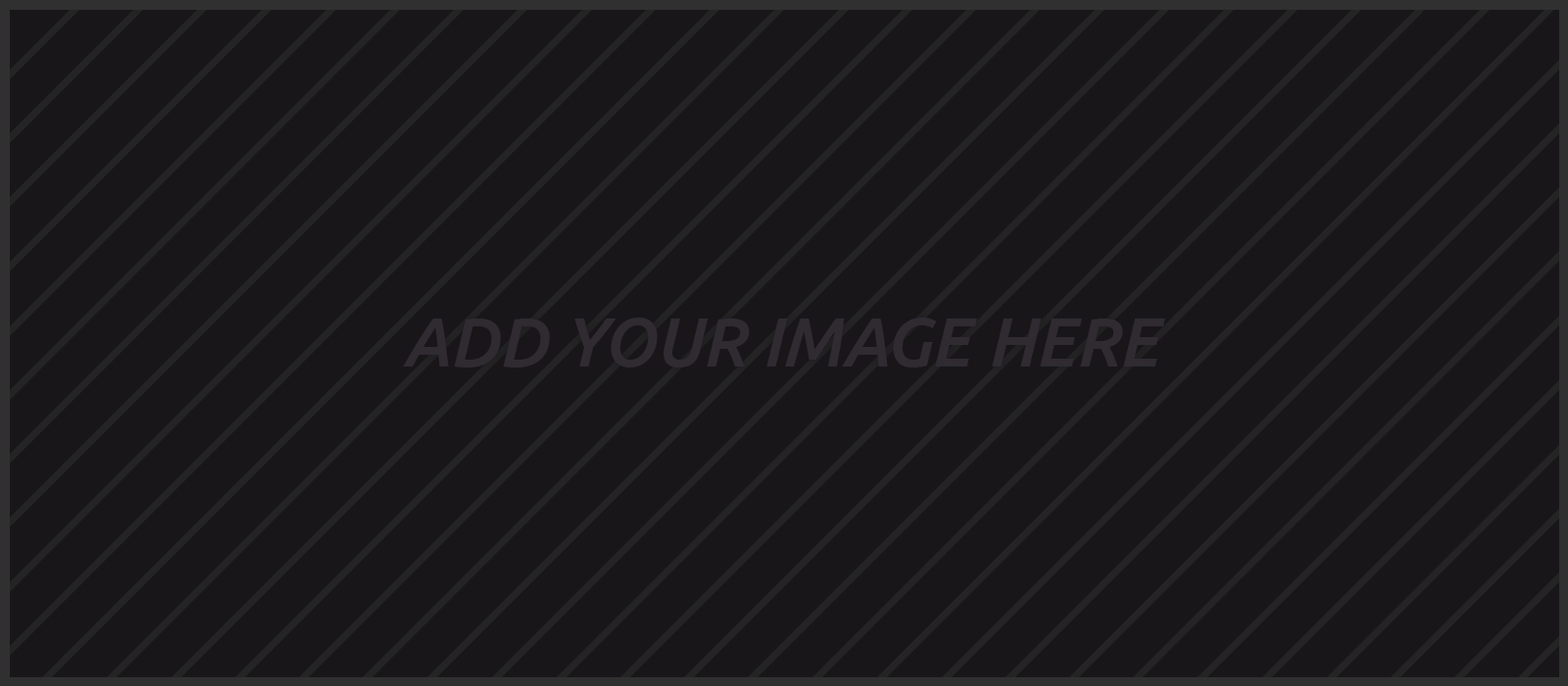
<style>
.page{position:relative;width:1568px;height:686px;background:#181619}
.page>*{position:absolute;margin:0}
.t1{font:69.6px "Ubuntu-MediumItalic";color:#413c44}
</style>
<div class="page">
<p class="t1" style="left:403px;top:318px;width:762px;height:50px;opacity:0.5">ADD YOUR IMAGE HERE</p>
</div>
